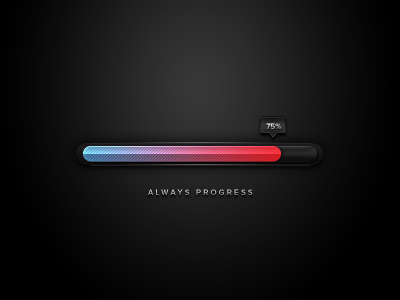
<style>
.page{position:relative;width:400px;height:300px}
.page>*{position:absolute;margin:0}
.t1{font:8px "ProximaNova-Bold";color:#e3e3e3;text-transform:uppercase}
.t2{font:8px "ProximaNova-Semibold";letter-spacing:0.28em;text-transform:uppercase}
</style>
<div class="page">
<p class="t1" style="left:266px;top:123px;width:15px;height:6px">75%</p>
<p class="t2" style="left:148px;top:189px;width:105px;height:6px">ALWAYS PROGRESS</p>
</div>
